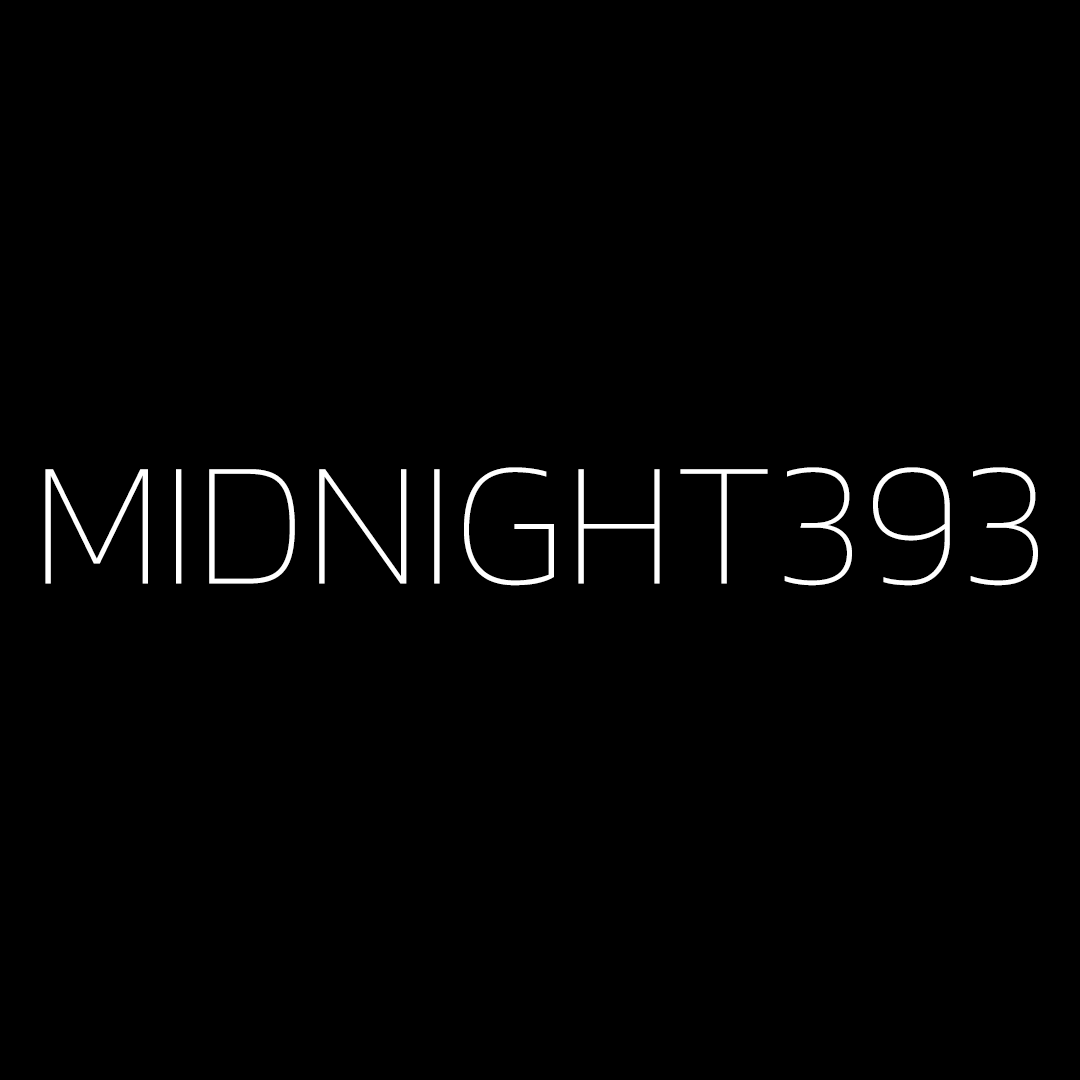
<style>
.page{position:relative;width:1080px;height:1080px;background:#000000}
.page>*{position:absolute;margin:0}
.t1{font:177px "Kanit-Thin";color:#ffffff}
</style>
<div class="page">
<p class="t1" style="left:45px;top:467px;width:993px;height:119px">MIDNIGHT393</p>
</div>
